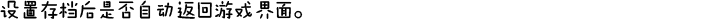
<style>
.page{position:relative;width:710px;height:20px;background:#ffffff}
.page>*{position:absolute;margin:0}
.t1{font:22px "¢è?";color:#000000}
</style>
<div class="page">
<p class="t1" style="left:0px;top:0px;width:303px;height:19px">设置存档后是否自动返回游戏界面。</p>
</div>
